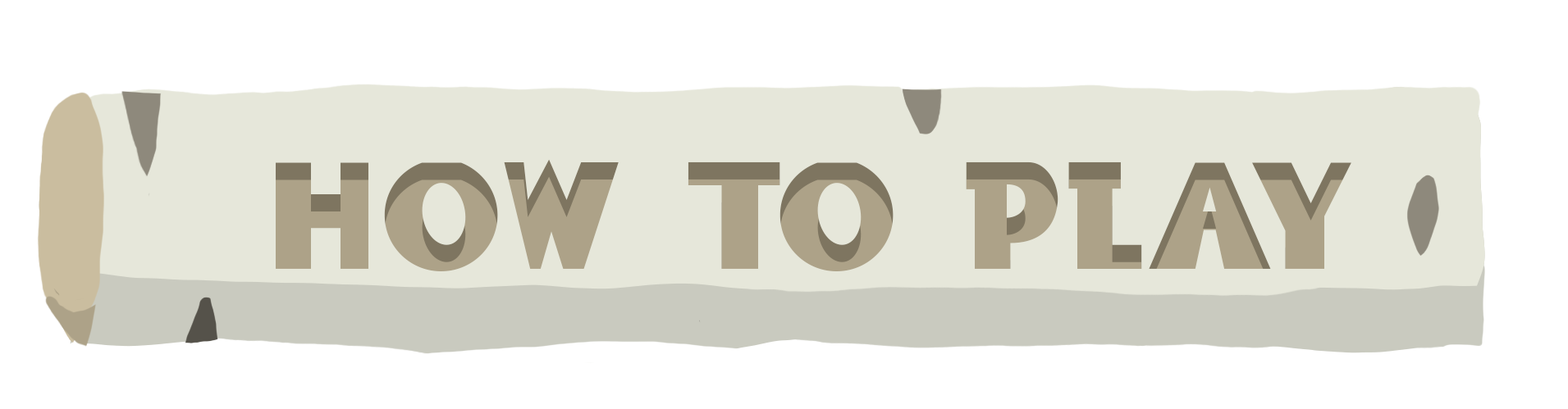
<style>
.page{position:relative;width:1568px;height:409px;background:#ffffff}
.page>*{position:absolute;margin:0}
.t1{font:148px "BadTyp-Regular";color:#ada288}
</style>
<div class="page">
<p class="t1" style="left:276px;top:159px;width:1075px;height:113px">How to play</p>
</div>
